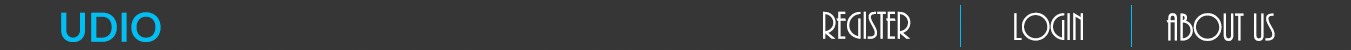
<style>
.page{position:relative;width:1351px;height:50px;background:#363636}
.page>*{position:absolute;margin:0}
.t1{font:40px "Lato-Semibold";color:#00bff3}
.t2{font:40px "ARBONNIE";color:#ffffff}
</style>
<div class="page">
<p class="t1" style="left:61px;top:12px;width:100px;height:30px">UDIO</p>
<p class="t2" style="left:823px;top:11px;width:88px;height:28px">Register</p>
<p class="t2" style="left:1014px;top:12px;width:69px;height:29px">login</p>
<p class="t2" style="left:1166px;top:13px;width:109px;height:28px">about us</p>
</div>
